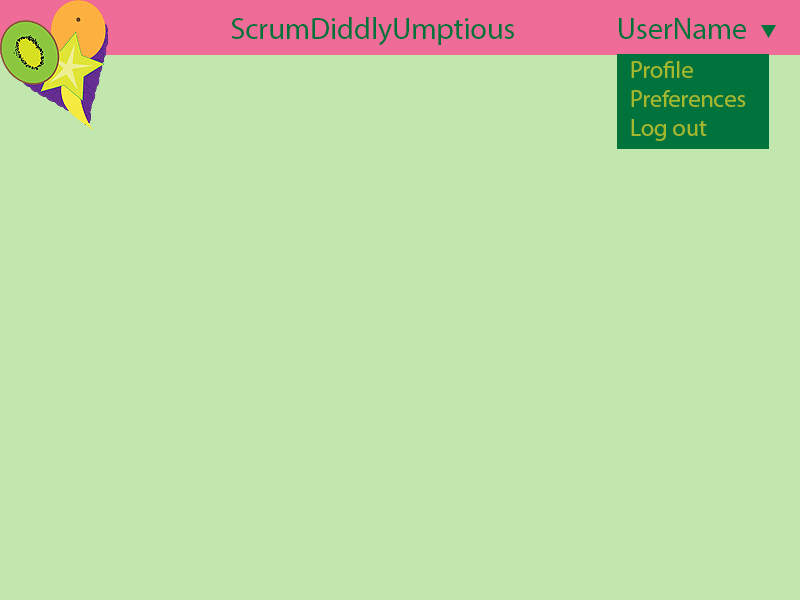
<style>
.page{position:relative;width:800px;height:600px;background:#c1e6ae}
.page>*{position:absolute;margin:0}
.t1{font:30px "MyriadPro-Regular";color:#00733c}
.t2{font:24px "MyriadPro-Regular";color:#a5b92e}
</style>
<div class="page">
<p class="t1" style="left:231px;top:17px;width:283px;height:29px">ScrumDiddlyUmptious</p>
<p class="t1" style="left:619px;top:18px;width:127px;height:21px">UserName</p>
<p class="t2" style="left:631px;top:61px;width:115px;height:80px">Profile<br>Preferences<br>Log out</p>
</div>
